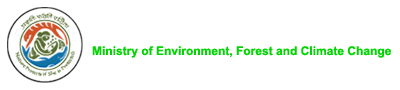
<style>
.page{position:relative;width:400px;height:90px;background:#ffffff}
.page>*{position:absolute;margin:0}
.t1{font:12px/16px "Arial-BoldMT";color:#03d503}
.t2{font:12px/16px "Arial-BoldMT";color:#ffffff}
</style>
<div class="page">
<p class="t1" style="left:92px;top:46px;width:299px;height:26px;text-align:justify">Ministry of Environment, Forest and Climate Change<br><span class="t2">Government of India</span></p>
</div>
